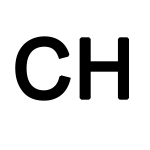
<style>
.page{position:relative;width:150px;height:150px;background:#ffffff}
.page>*{position:absolute;margin:0}
.t1{font:83.4px "ArialNarrow";color:#000000;font-weight:bold;scale:1.2 1}
</style>
<div class="page">
<p class="t1" style="left:15px;top:36px;width:114px;height:65px">CH</p>
</div>
